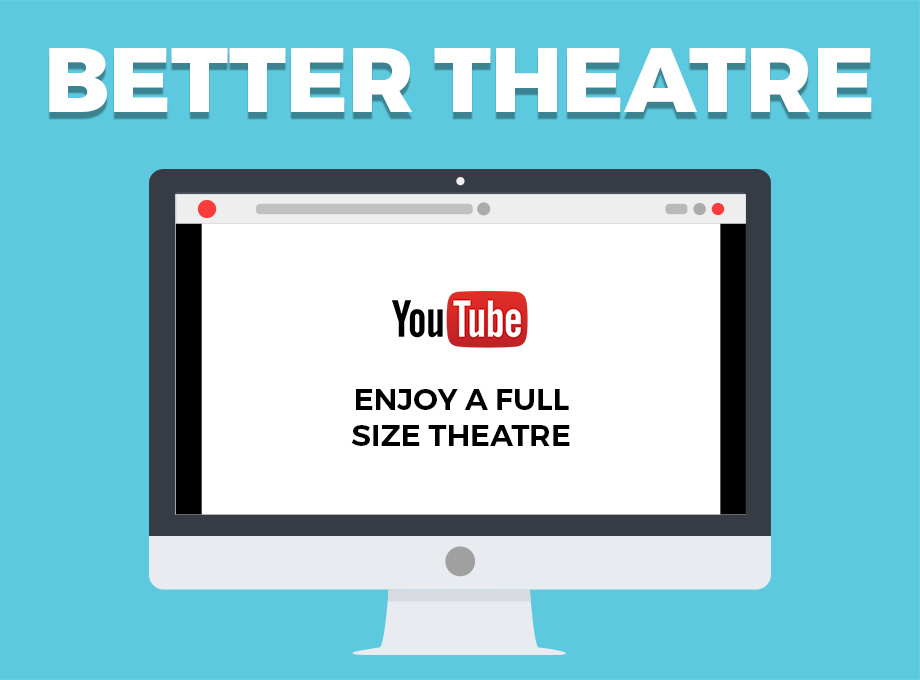
<style>
.page{position:relative;width:920px;height:680px;background:#5cc9df}
.page>*{position:absolute;margin:0}
.t1{font:91.1px "Montserrat-ExtraBold";color:#ffffff;text-transform:uppercase}
.t2{font:30.1px "Montserrat-SemiBold";color:#000000;text-transform:uppercase}
</style>
<div class="page">
<p class="t1" style="left:49px;top:48px;width:823px;height:64px">Better Theatre</p>
<p class="t2" style="left:351px;top:389px;width:219px;height:57px;text-align:center">Enjoy a full<br>size theatre</p>
</div>
